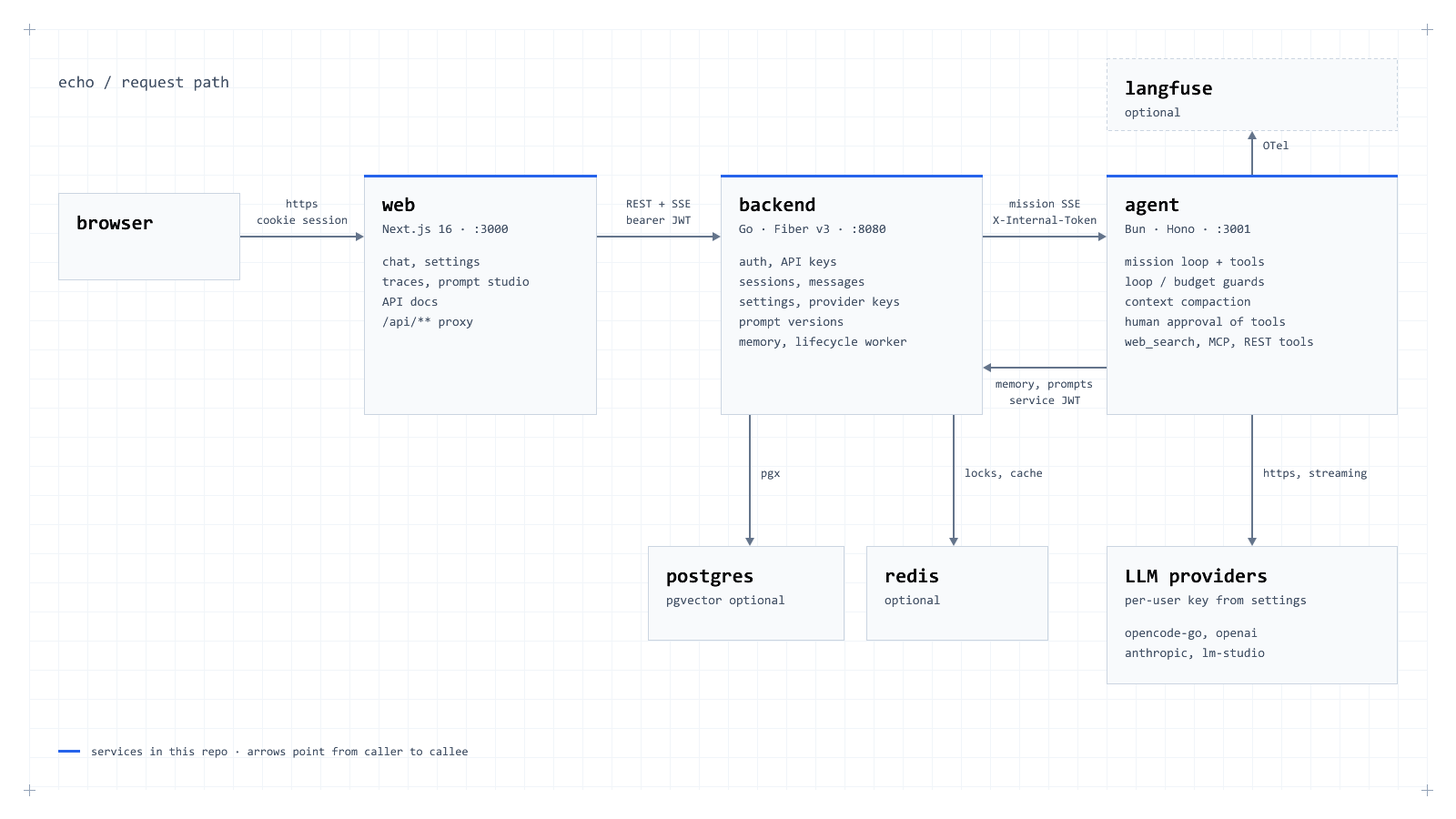
<style>
.page{position:relative;width:1456px;height:819px;background:#ffffff}
.page>*{position:absolute;margin:0}
.t1{font:16.4px "Consolas";color:#475569}
.t2{font:20px "Consolas-Bold";color:#09090b}
.t3{font:12.7px "Consolas";color:#475569}
.t4{font:11.8px "Consolas";color:#475569}
</style>
<div class="page">
<p class="t1" style="left:59px;top:76px;width:169px;height:15px">echo / request path</p>
<p class="t2" style="left:1126px;top:80px;width:86px;height:19px">langfuse</p>
<p class="t3" style="left:1125px;top:107px;width:55px;height:12px">optional</p>
<p class="t4" style="left:1263px;top:141px;width:26px;height:9px">OTel</p>
<p class="t2" style="left:382px;top:197px;width:33px;height:15px">web</p>
<p class="t2" style="left:740px;top:197px;width:75px;height:15px">backend</p>
<p class="t2" style="left:1126px;top:197px;width:52px;height:19px">agent</p>
<p class="t4" style="left:287px;top:199px;width:31px;height:11px">https</p>
<p class="t4" style="left:627px;top:199px;width:64px;height:9px">REST + SSE</p>
<p class="t4" style="left:1009px;top:199px;width:71px;height:9px">mission SSE</p>
<p class="t2" style="left:77px;top:215px;width:76px;height:15px">browser</p>
<p class="t4" style="left:258px;top:216px;width:89px;height:9px">cookie session</p>
<p class="t4" style="left:627px;top:216px;width:64px;height:9px">bearer JWT</p>
<p class="t4" style="left:993px;top:216px;width:104px;height:9px">X-Internal-Token</p>
<p class="t3" style="left:382px;top:224px;width:126px;height:12px">Next.js 16 · :3000</p>
<p class="t3" style="left:739px;top:224px;width:146px;height:10px">Go · Fiber v3 · :8080</p>
<p class="t3" style="left:1126px;top:225px;width:124px;height:9px">Bun · Hono · :3001</p>
<p class="t3" style="left:383px;top:257px;width:97px;height:11px">chat, settings</p>
<p class="t3" style="left:740px;top:257px;width:96px;height:11px">auth, API keys</p>
<p class="t3" style="left:1125px;top:257px;width:139px;height:11px">mission loop + tools</p>
<p class="t3" style="left:382px;top:277px;width:147px;height:11px">traces, prompt studio</p>
<p class="t3" style="left:740px;top:277px;width:124px;height:11px">sessions, messages</p>
<p class="t3" style="left:1126px;top:277px;width:138px;height:11px">loop / budget guards</p>
<p class="t3" style="left:382px;top:297px;width:56px;height:10px">API docs</p>
<p class="t3" style="left:740px;top:297px;width:159px;height:11px">settings, provider keys</p>
<p class="t3" style="left:1126px;top:297px;width:124px;height:11px">context compaction</p>
<p class="t3" style="left:383px;top:317px;width:90px;height:12px">/api/** proxy</p>
<p class="t3" style="left:740px;top:317px;width:104px;height:12px">prompt versions</p>
<p class="t3" style="left:1126px;top:317px;width:159px;height:12px">human approval of tools</p>
<p class="t3" style="left:739px;top:337px;width:167px;height:12px">memory, lifecycle worker</p>
<p class="t3" style="left:1125px;top:337px;width:188px;height:12px">web_search, MCP, REST tools</p>
<p class="t4" style="left:996px;top:379px;width:96px;height:11px">memory, prompts</p>
<p class="t4" style="left:1010px;top:396px;width:70px;height:9px">service JWT</p>
<p class="t4" style="left:762px;top:470px;width:18px;height:10px">pgx</p>
<p class="t4" style="left:965px;top:469px;width:77px;height:11px">locks, cache</p>
<p class="t4" style="left:1264px;top:469px;width:103px;height:11px">https, streaming</p>
<p class="t2" style="left:667px;top:569px;width:86px;height:18px">postgres</p>
<p class="t2" style="left:886px;top:568px;width:52px;height:15px">redis</p>
<p class="t2" style="left:1127px;top:568px;width:140px;height:19px">LLM providers</p>
<p class="t3" style="left:667px;top:595px;width:117px;height:12px">pgvector optional</p>
<p class="t3" style="left:885px;top:595px;width:55px;height:12px">optional</p>
<p class="t3" style="left:1126px;top:595px;width:180px;height:12px">per-user key from settings</p>
<p class="t3" style="left:1125px;top:628px;width:133px;height:12px">opencode-go, openai</p>
<p class="t3" style="left:1126px;top:648px;width:139px;height:12px">anthropic, lm-studio</p>
<p class="t4" style="left:92px;top:747px;width:376px;height:11px">services in this repo · arrows point from caller to callee</p>
</div>
